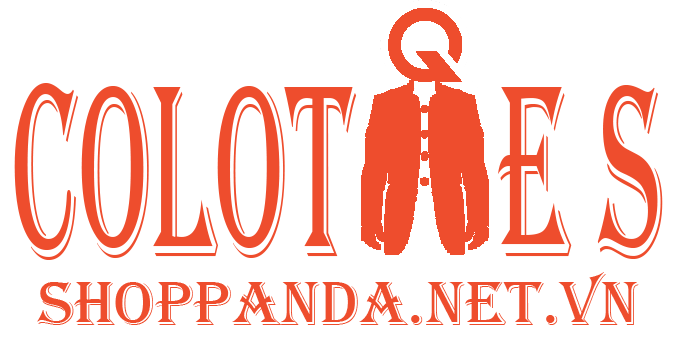
<style>
.page{position:relative;width:677px;height:360px;background:#ffffff}
.page>*{position:absolute;margin:0}
.t1{font:253.2px "Algerian";color:#ee4d2d;scale:0.46 1}
.t2{font:65px "Algerian";color:#ee4d2d}
</style>
<div class="page">
<p class="t1" style="left:14px;top:83px;width:649px;height:177px">COLOT     E S</p>
<p class="t2" style="left:37px;top:272px;width:602px;height:53px">SHOPPANDA.NET.VN</p>
</div>
